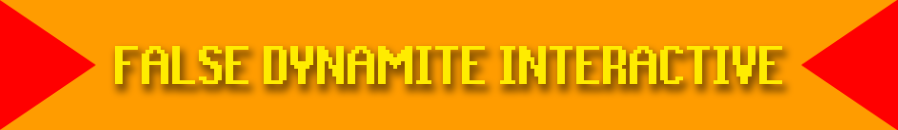
<style>
.page{position:relative;width:898px;height:130px;background:#ff9c00}
.page>*{position:absolute;margin:0}
.t1{font:61px "RuneScape-UF";color:#ffec00}
.t2{font:61px "RuneScape-UF";color:#ff0000}
</style>
<div class="page">
<p class="t1" style="left:115px;top:45px;width:668px;height:39px"><span class="t2">F</span>ALSE DYNAMITE INTERACTIVE</p>
</div>
